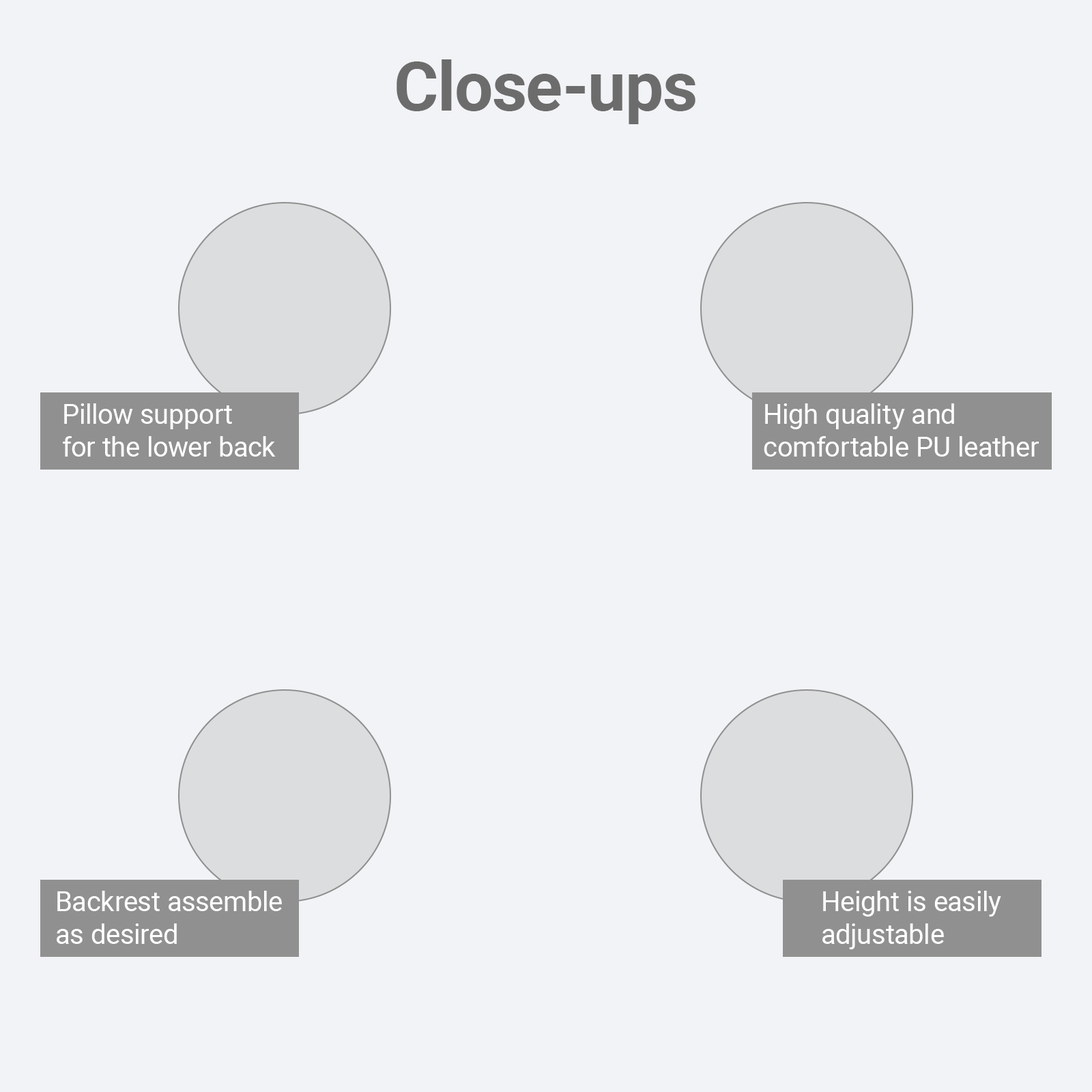
<style>
.page{position:relative;width:1092px;height:1092px;background:#f2f3f6}
.page>*{position:absolute;margin:0}
.t1{font:68.2px "Roboto-Bold";color:#6c6c6c}
.t2{font:27.3px "Roboto-Regular";color:#ffffff}
</style>
<div class="page">
<p class="t1" style="left:397px;top:59px;width:298px;height:65px">Close-ups</p>
<p class="t2" style="left:63px;top:403px;width:213px;height:54px">Pillow support<br>for the lower back</p>
<p class="t2" style="left:764px;top:403px;width:275px;height:54px">High quality and<br>comfortable PU leather</p>
<p class="t2" style="left:57px;top:891px;width:225px;height:53px">Backrest assemble<br>as desired</p>
<p class="t2" style="left:822px;top:891px;width:179px;height:58px">Height is easily<br>adjustable</p>
</div>
